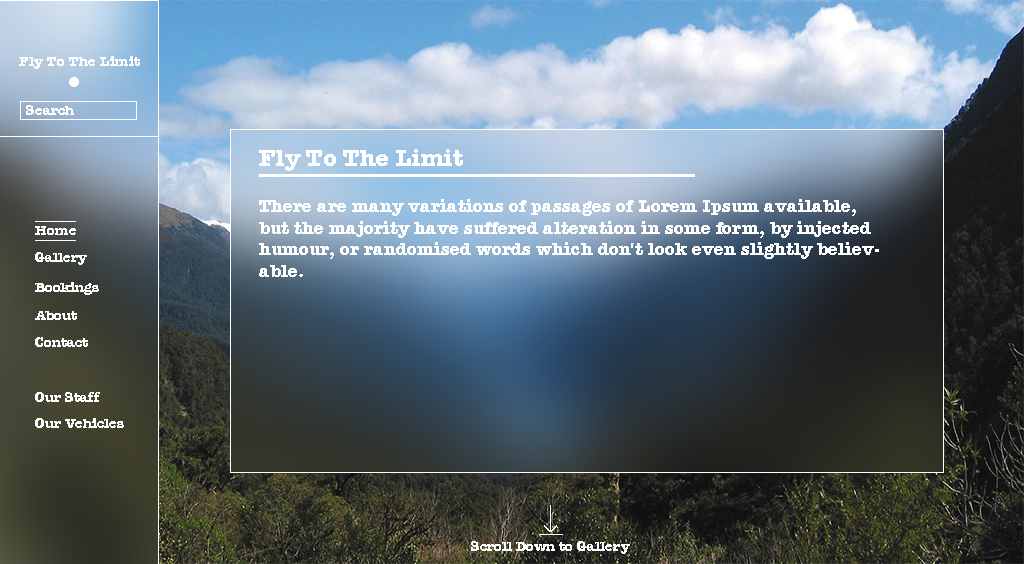
<style>
.page{position:relative;width:1024px;height:564px}
.page>*{position:absolute;margin:0}
.t1{font:14px "AmericanTypewriter-Bold";color:#ffffff}
.t2{font:24px "AmericanTypewriter-Bold";color:#ffffff}
.t3{font:18px "AmericanTypewriter-Bold";color:#ffffff}
</style>
<div class="page">
<p class="t1" style="left:19px;top:56px;width:121px;height:13px">Fly To The Limit</p>
<p class="t1" style="left:26px;top:105px;width:48px;height:10px">Search</p>
<p class="t2" style="left:259px;top:149px;width:204px;height:22px">Fly To The Limit</p>
<p class="t3" style="left:259px;top:199px;width:620px;height:78px">There are many variations of passages of Lorem Ipsum available, but the majority have suffered alteration in some form, by injected humour, or randomised words which don't look even slightly believable.</p>
<p class="t1" style="left:35px;top:226px;width:41px;height:9px">Home</p>
<p class="t1" style="left:35px;top:252px;width:52px;height:13px">Gallery</p>
<p class="t1" style="left:35px;top:282px;width:64px;height:13px">Bookings</p>
<p class="t1" style="left:35px;top:311px;width:42px;height:9px">About</p>
<p class="t1" style="left:35px;top:337px;width:53px;height:10px">Contact</p>
<p class="t1" style="left:35px;top:392px;width:65px;height:10px">Our Staff</p>
<p class="t1" style="left:35px;top:418px;width:89px;height:10px">Our Vehicles</p>
<p class="t1" style="left:471px;top:541px;width:159px;height:13px">Scroll Down to Gallery</p>
</div>
